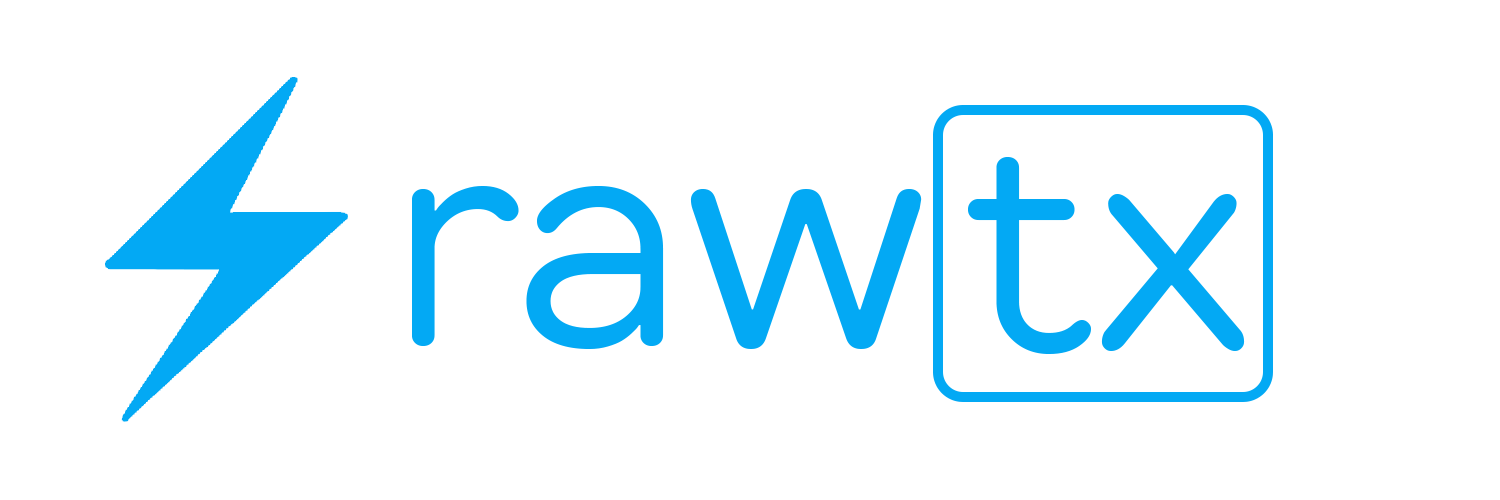
<style>
.page{position:relative;width:1500px;height:500px;background:#ffffff}
.page>*{position:absolute;margin:0}
.t1{font:300px "TTRounds-Regular";color:#03a9f4}
</style>
<div class="page">
<p class="t1" style="left:968px;top:157px;width:277px;height:197px">tx</p>
<p class="t1" style="left:412px;top:186px;width:510px;height:163px">raw</p>
</div>
